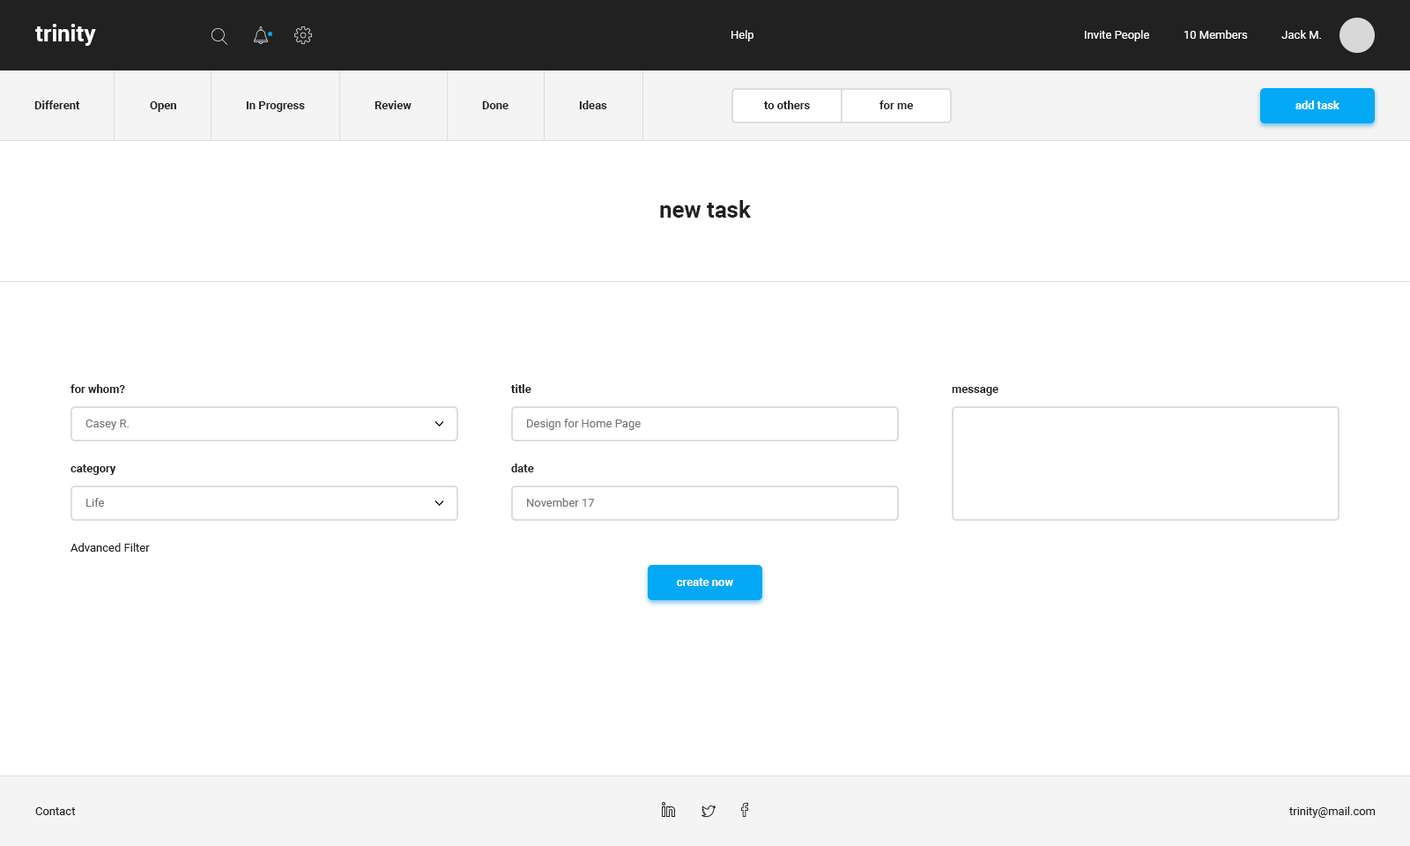
<style>
.page{position:relative;width:1410px;height:846px;background:#ffffff}
.page>*{position:absolute;margin:0}
.t1{font:22.9px "Roboto-Bold";color:#ffffff}
.t2{font:11.5px "Roboto-Regular";color:#ffffff}
.t3{font:11.5px "Roboto-Bold";color:#212121}
.t4{font:11.5px "Roboto-Bold";color:#ffffff}
.t5{font:22.9px "Roboto-Bold";color:#212121}
.t6{font:11.5px "Roboto-Regular";color:#757575}
.t7{font:11.5px "Roboto-Regular";color:#212121}
</style>
<div class="page">
<p class="t1" style="left:35px;top:24px;width:61px;height:22px">trinity</p>
<p class="t2" style="left:731px;top:30px;width:22px;height:11px">Help</p>
<p class="t2" style="left:1085px;top:30px;width:236px;height:11px">Invite People            10 Members            Jack M.</p>
<p class="t3" style="left:34px;top:100px;width:46px;height:9px">Different</p>
<p class="t3" style="left:150px;top:101px;width:26px;height:11px">Open</p>
<p class="t3" style="left:246px;top:101px;width:59px;height:11px">In Progress</p>
<p class="t3" style="left:374px;top:100px;width:37px;height:9px">Review</p>
<p class="t3" style="left:482px;top:101px;width:26px;height:8px">Done</p>
<p class="t3" style="left:579px;top:100px;width:28px;height:9px">Ideas</p>
<p class="t3" style="left:763px;top:100px;width:47px;height:9px">to others</p>
<p class="t3" style="left:879px;top:100px;width:34px;height:9px">for me</p>
<p class="t4" style="left:1295px;top:100px;width:44px;height:9px">add task</p>
<p class="t5" style="left:660px;top:200px;width:92px;height:18px">new task</p>
<p class="t3" style="left:70px;top:384px;width:55px;height:9px">for whom?</p>
<p class="t3" style="left:511px;top:384px;width:20px;height:9px">title</p>
<p class="t3" style="left:952px;top:387px;width:46px;height:9px">message</p>
<p class="t6" style="left:85px;top:419px;width:44px;height:11px">Casey R.</p>
<p class="t6" style="left:527px;top:419px;width:114px;height:11px">Design for Home Page</p>
<p class="t3" style="left:70px;top:464px;width:46px;height:11px">category</p>
<p class="t3" style="left:511px;top:463px;width:23px;height:9px">date</p>
<p class="t6" style="left:86px;top:498px;width:18px;height:9px">Life</p>
<p class="t6" style="left:527px;top:498px;width:68px;height:9px">November 17</p>
<p class="t7" style="left:70px;top:543px;width:80px;height:9px">Advanced Filter</p>
<p class="t4" style="left:677px;top:578px;width:56px;height:8px">create now</p>
<p class="t7" style="left:35px;top:807px;width:41px;height:8px">Contact</p>
<p class="t7" style="left:1288px;top:806px;width:87px;height:12px">trinity@mail.com</p>
</div>
